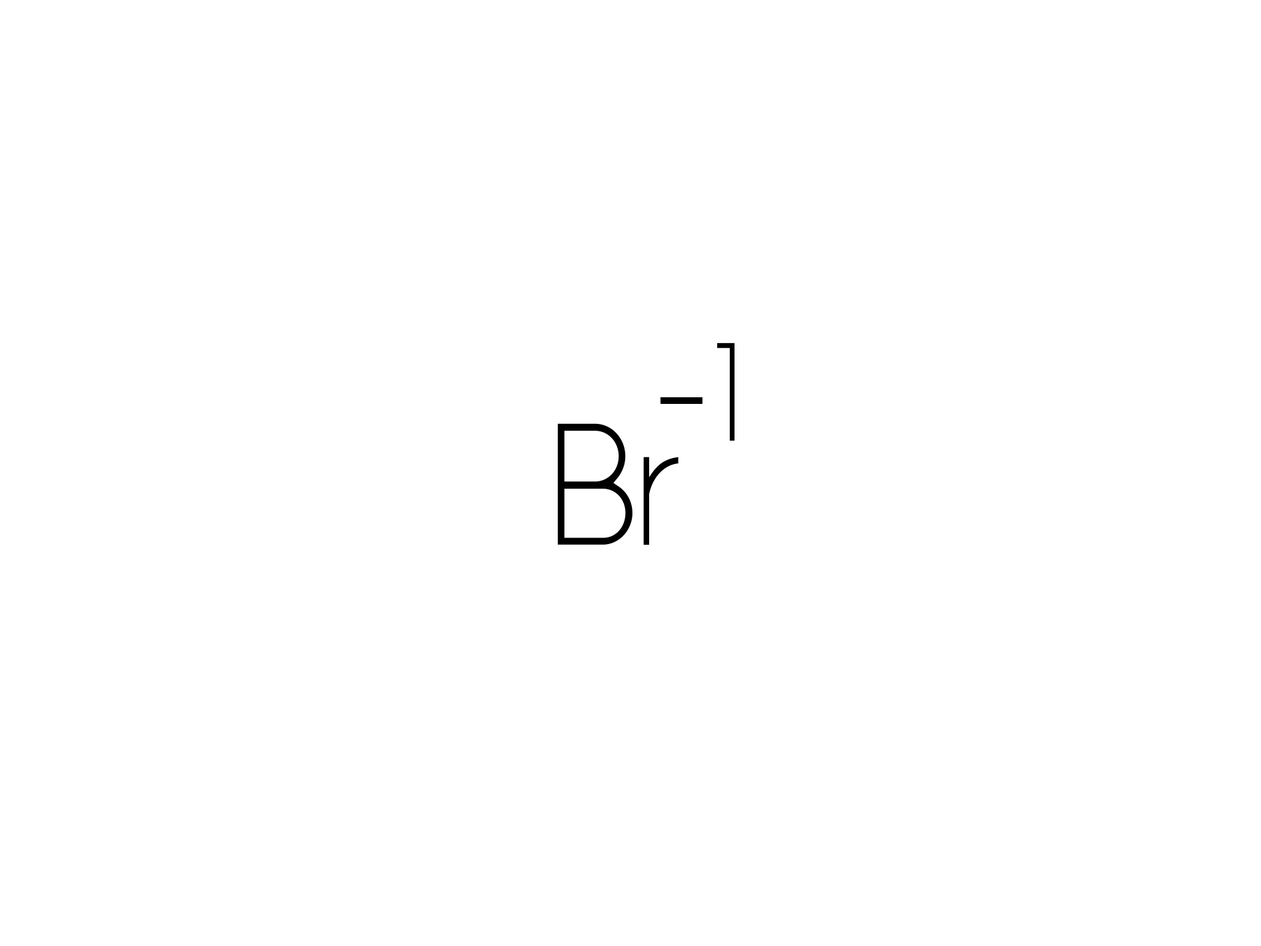
<style>
.page{position:relative;width:1261px;height:946px;background:#ffffff}
.page>*{position:absolute;margin:0}
.t1{font:138.9px "Alcubierre";color:#000000;scale:0.95 1}
.t2{font:162.1px "Alcubierre";color:#000000;scale:0.95 1}
.t3{font:173.6px "Alcubierre";color:#000000;scale:0.95 1}
</style>
<div class="page">
<p class="t1" style="left:717px;top:342px;width:18px;height:99px">1</p>
<p class="t2" style="left:660px;top:397px;width:43px;height:7px">-</p>
<p class="t3" style="left:558px;top:423px;width:121px;height:121px">Br</p>
</div>
